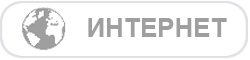
<style>
.page{position:relative;width:250px;height:60px;background:#ffffff}
.page>*{position:absolute;margin:0}
.t1{font:26px "Arial-BoldMT";color:#9f9f9f}
</style>
<div class="page">
<p class="t1" style="left:88px;top:18px;width:139px;height:19px">ИНТЕРНЕТ</p>
</div>
